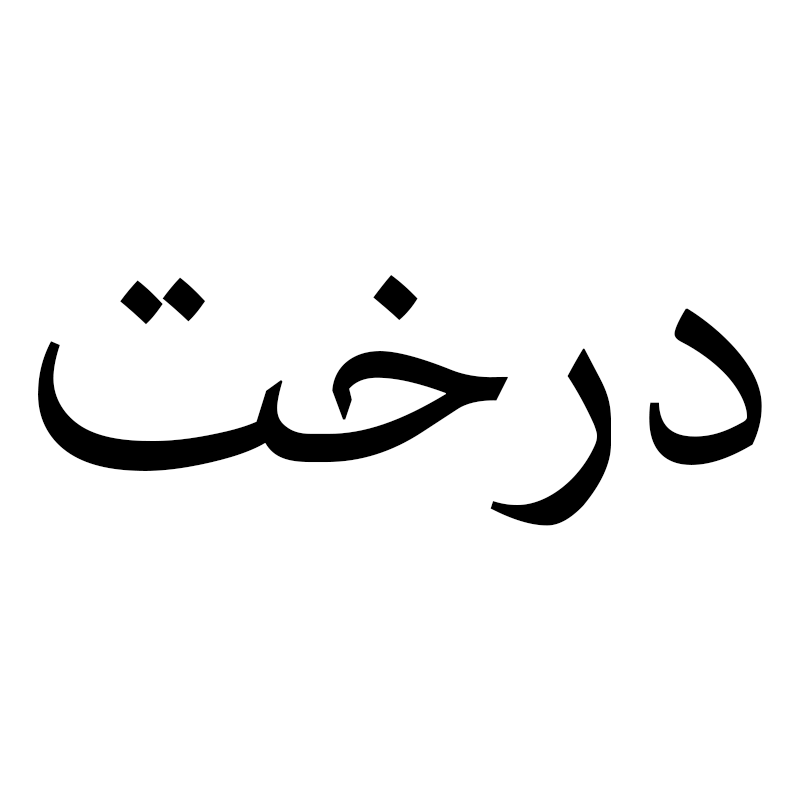
<style>
.page{position:relative;width:800px;height:800px;background:#ffffff}
.page>*{position:absolute;margin:0}
.t1{font:450px "AdobeArabic-Regular";color:#000000}
</style>
<div class="page">
<p class="t1" style="left:38px;top:275px;width:724px;height:251px">درخت</p>
</div>
